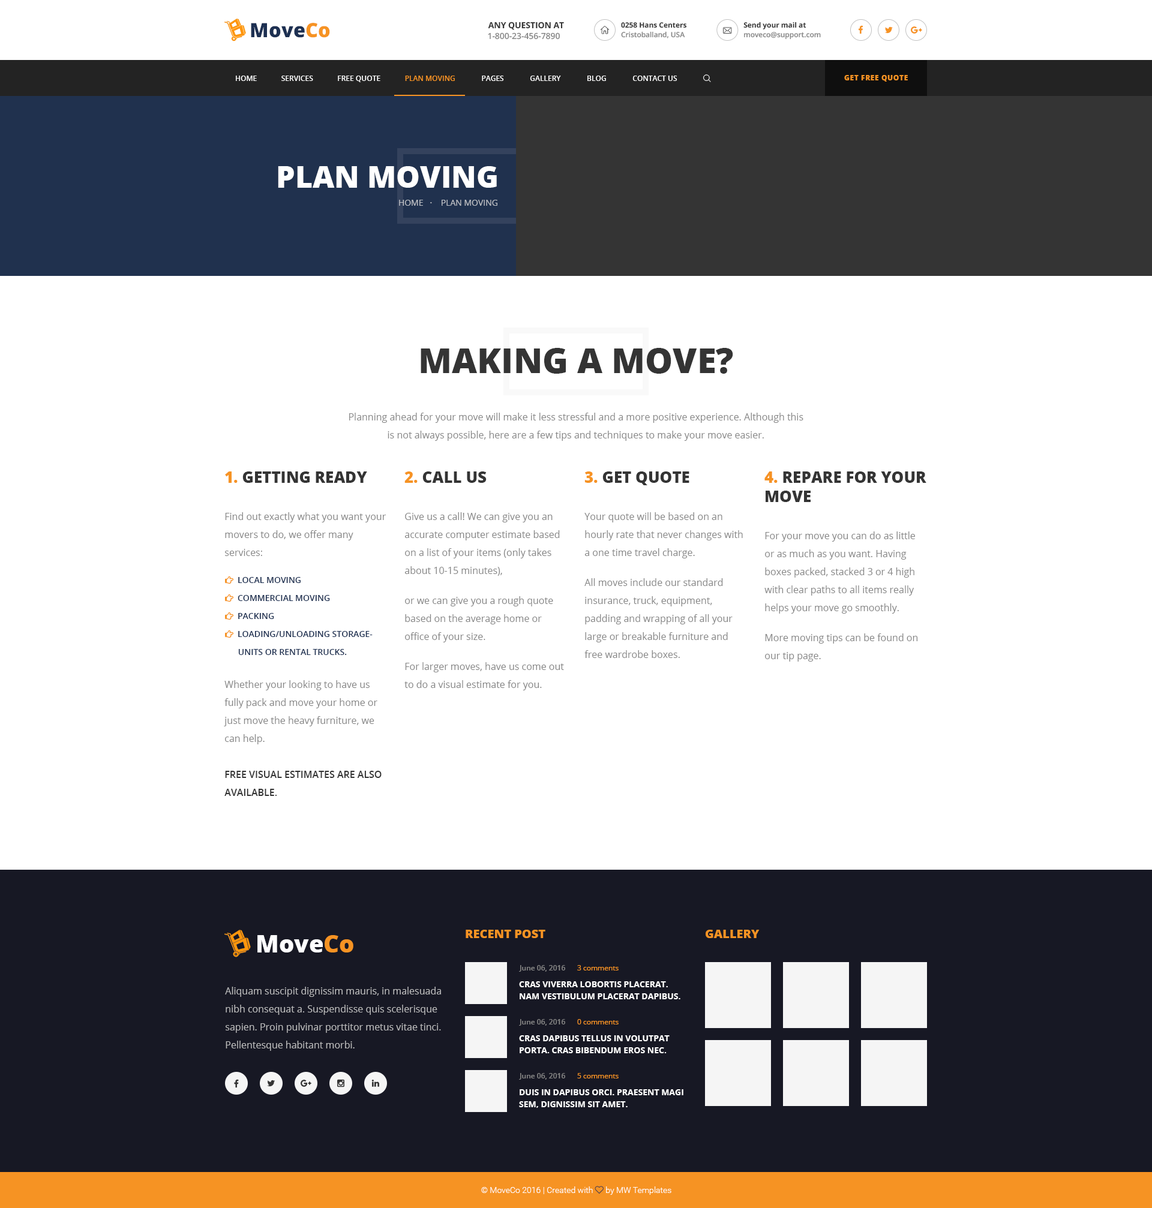
<style>
.page{position:relative;width:1152px;height:1208px;background:#ffffff}
.page>*{position:absolute;margin:0}
.t1{font:19.8px "OpenSans-Extrabold";color:#1d3052}
.t2{font:19.8px "OpenSans-Extrabold";color:#f69323}
.t3{font:8.4px "OpenSans-Bold";color:#343434;text-transform:uppercase}
.t4{font:7.2px "OpenSans-Bold";color:#343434}
.t5{font:8.4px "OpenSans-Semibold";color:#868686}
.t6{font:7.2px "OpenSans-Semibold";color:#868686}
.t7{font:7.2px "OpenSans-Extrabold";letter-spacing:0.05em;color:#f69323;text-transform:uppercase}
.t8{font:30px "OpenSans-Extrabold";color:#ffffff;text-transform:uppercase}
.t9{font:8.4px "OpenSans";color:#bcbfc5;text-transform:uppercase}
.t10{font:34.8px "OpenSans-Extrabold";color:#343434;text-transform:uppercase}
.t11{font:9.6px/18px "OpenSans";color:#868686}
.t12{font:15.6px "OpenSans-Extrabold";color:#343434;text-transform:uppercase}
.t13{font:15.6px "OpenSans-Extrabold";color:#f69323;text-transform:uppercase}
.t14{font:15.6px/19.2px "OpenSans-Extrabold";color:#343434;text-transform:uppercase}
.t15{font:15.6px/19.2px "OpenSans-Extrabold";color:#f69323;text-transform:uppercase}
.t16{font:9.6px/18px "OpenSans-Semibold";color:#343434;text-transform:uppercase}
.t17{font:24px "OpenSans-Extrabold";color:#fefeff}
.t18{font:24px "OpenSans-Extrabold";color:#f69323}
.t19{font:12px "OpenSans-Extrabold";color:#f69323;text-transform:uppercase}
.t20{font:7.2px "OpenSans";color:#f69323}
.t21{font:9.6px/18px "OpenSans";color:#bbbbbc}
.t22{font:8.4px/12px "OpenSans-Bold";color:#ffffff;text-transform:uppercase}
</style>
<div class="page">
<p class="t1" style="left:251px;top:23px;width:79px;height:15px">Move<span class="t2">Co</span></p>
<p class="t3" style="left:488px;top:22px;width:76px;height:8px">Any Question at</p>
<p class="t4" style="left:621px;top:22px;width:65px;height:6px">0258 Hans Centers</p>
<p class="t4" style="left:743px;top:22px;width:63px;height:7px">Send your mail at</p>
<p class="t5" style="left:488px;top:32px;width:72px;height:8px">1-800-23-456-7890</p>
<p class="t6" style="left:621px;top:31px;width:64px;height:7px">Cristoballand, USA</p>
<p class="t6" style="left:744px;top:32px;width:77px;height:8px">moveco@support.com</p>
<p class="t7" style="left:844px;top:75px;width:64px;height:7px">Get Free Quote</p>
<p class="t8" style="left:278px;top:166px;width:219px;height:22px">Plan moving</p>
<p class="t9" style="left:399px;top:200px;width:98px;height:6px">home   ·    plan Moving</p>
<p class="t10" style="left:421px;top:348px;width:312px;height:26px">Making a move?</p>
<p class="t11" style="left:349px;top:413px;width:454px;height:28px;text-align:center">Planning ahead for your move will make it less stressful and a more positive experience. Although this is not always possible, here are a few tips and techniques to make your move easier.</p>
<p class="t12" style="left:225px;top:472px;width:142px;height:11px"><span class="t13">1.</span> Getting ready</p>
<p class="t12" style="left:404px;top:472px;width:83px;height:11px"><span class="t13">2.</span> Call us</p>
<p class="t12" style="left:584px;top:472px;width:105px;height:13px"><span class="t13">3.</span> get quote</p>
<p class="t14" style="left:764px;top:472px;width:162px;height:30px"><span class="t15">4.</span> repare for your<br>move</p>
<p class="t11" style="left:225px;top:512px;width:161px;height:44px">Find out exactly what you want your movers to do, we offer many services:</p>
<p class="t11" style="left:404px;top:512px;width:160px;height:179px">Give us a call! We can give you an accurate computer estimate based on a list of your items (only takes about 10-15 minutes),<br>or we can give you a rough quote based on the average home or office of your size.<br>For larger moves, have us come out to do a visual estimate for you.</p>
<p class="t11" style="left:584px;top:512px;width:159px;height:146px">Your quote will be based on an hourly rate that never changes with a one time travel charge.<br>All moves include our standard insurance, truck, equipment, padding and wrapping of all your large or breakable furniture and free wardrobe boxes.</p>
<p class="t11" style="left:764px;top:532px;width:154px;height:130px">For your move you can do as little or as much as you want. Having boxes packed, stacked 3 or 4 high with clear paths to all items really helps your move go smoothly.<br>More moving tips can be found on our tip page.</p>
<p class="t11" style="left:224px;top:680px;width:158px;height:116px">Whether your looking to have us fully pack and move your home or just move the heavy furniture, we can help.<br><br><span class="t16">free visual estimates are also available.</span></p>
<p class="t17" style="left:257px;top:935px;width:96px;height:18px">Move<span class="t18">Co</span></p>
<p class="t19" style="left:466px;top:930px;width:79px;height:8px">recent post</p>
<p class="t19" style="left:706px;top:930px;width:54px;height:8px">Gallery</p>
<p class="t6" style="left:519px;top:965px;width:46px;height:7px">June 06, 2016</p>
<p class="t20" style="left:577px;top:965px;width:42px;height:6px">3 comments</p>
<p class="t21" style="left:225px;top:987px;width:216px;height:64px">Aliquam suscipit dignissim mauris, in malesuada nibh consequat a. Suspendisse quis scelerisque sapien. Proin pulvinar porttitor metus vitae tinci. Pellentesque habitant morbi.</p>
<p class="t22" style="left:519px;top:982px;width:161px;height:18px">Cras viverra lobortis placerat. Nam vestibulum placerat dapibus.</p>
<p class="t6" style="left:519px;top:1019px;width:46px;height:7px">June 06, 2016</p>
<p class="t20" style="left:577px;top:1019px;width:42px;height:6px">0 comments</p>
<p class="t22" style="left:519px;top:1036px;width:151px;height:18px">Cras dapibus tellus in volutpat porta. Cras bibendum eros nec.</p>
<p class="t6" style="left:519px;top:1073px;width:46px;height:7px">June 06, 2016</p>
<p class="t20" style="left:577px;top:1073px;width:42px;height:6px">5 comments</p>
<p class="t22" style="left:519px;top:1090px;width:164px;height:18px">Duis in dapibus orci. Praesent magi sem, dignissim sit amet.</p>
</div>
